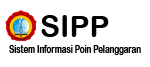
<style>
.page{position:relative;width:150px;height:67px;background:#ffffff}
.page>*{position:absolute;margin:0}
.t1{font:30px "ArialRoundedMTBold";color:#000000}
.t2{font:11px "ArialRoundedMTBold";color:#000000;scale:0.71 1}
</style>
<div class="page">
<p class="t1" style="left:41px;top:15px;width:68px;height:22px">SIPP</p>
<p class="t2" style="left:9px;top:45px;width:132px;height:10px">Sistem Informasi Poin Pelanggaran</p>
</div>
